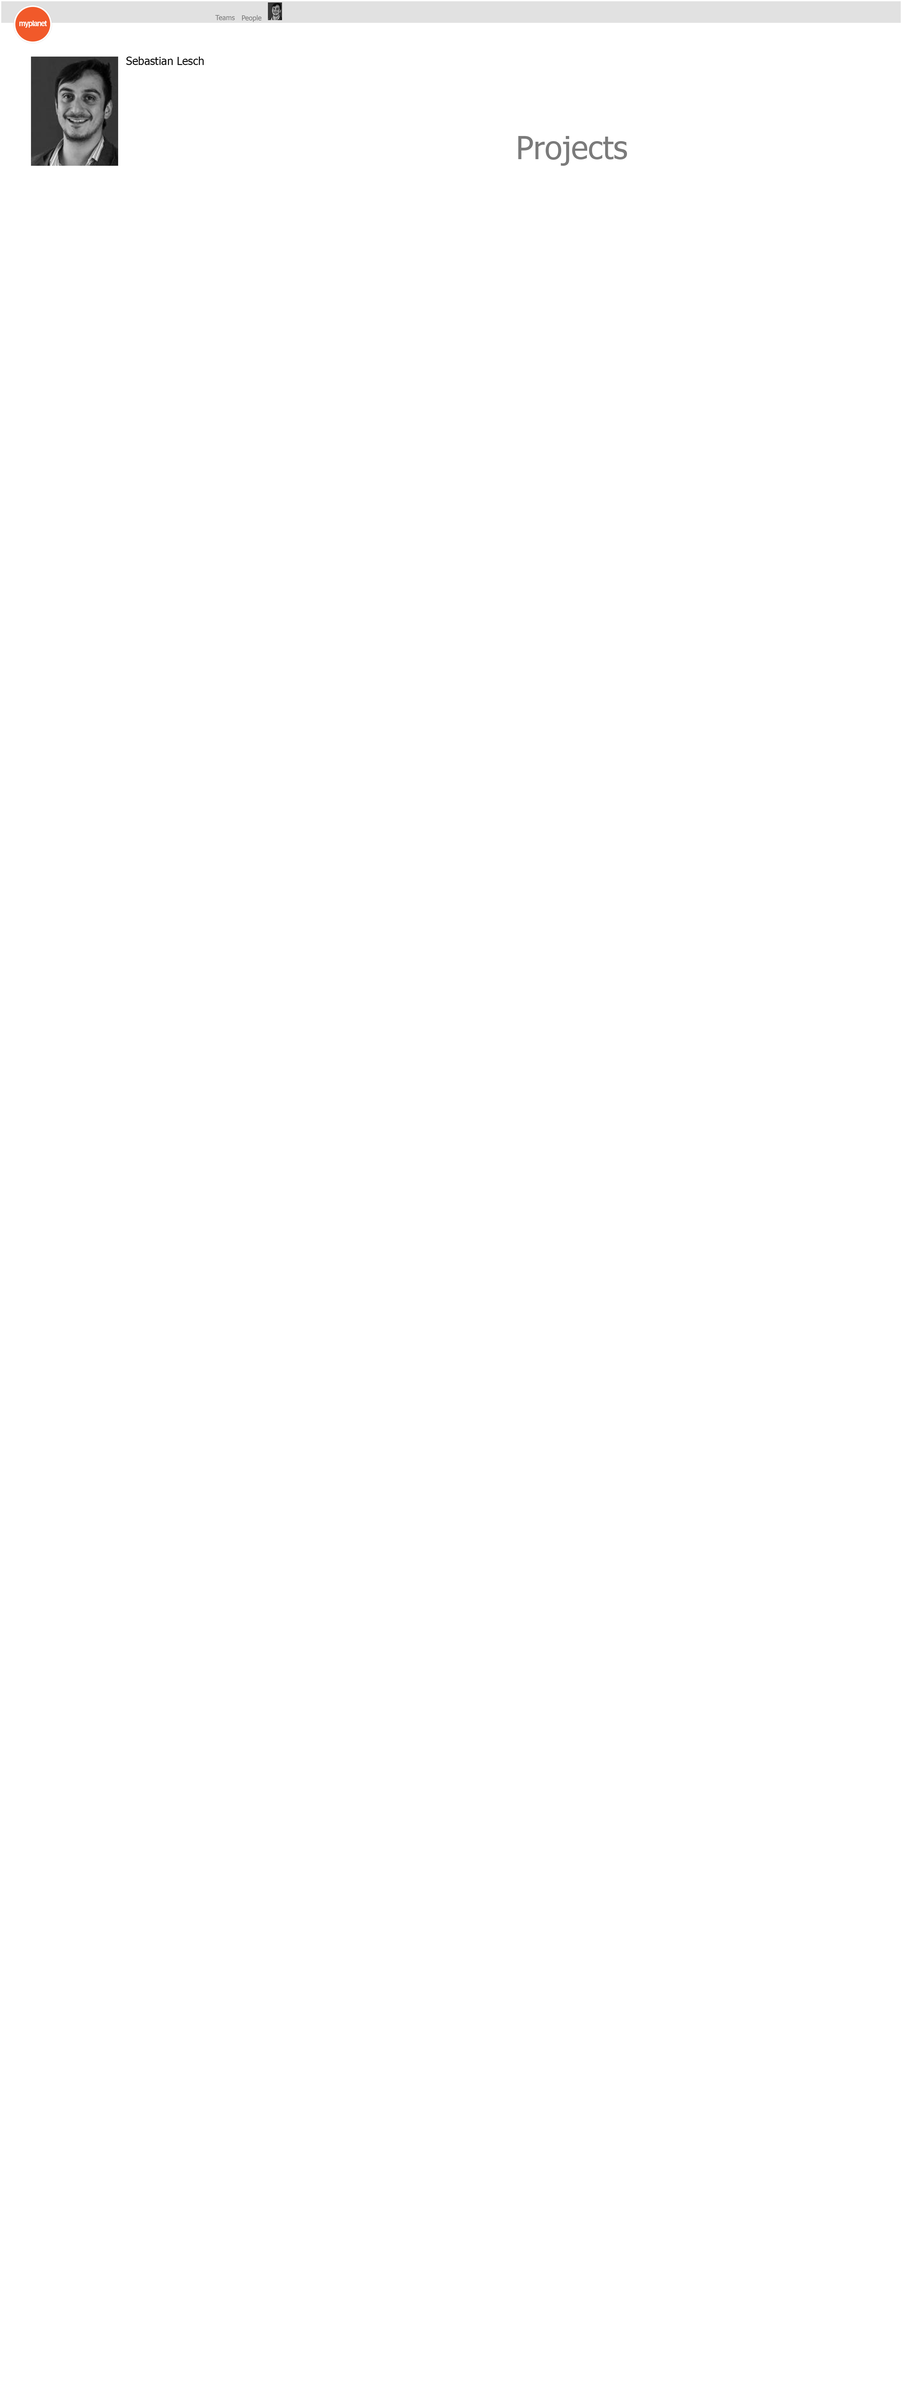
<style>
.page{position:relative;width:902px;height:2407px;background:#ffffff}
.page>*{position:absolute;margin:0}
.t1{font:6.9px "Tahoma";color:#7b7b7b}
.t2{font:11.1px "Tahoma";color:#000000}
.t3{font:32px "Tahoma";color:#7b7b7b}
</style>
<div class="page">
<p class="t1" style="left:215px;top:15px;width:20px;height:5px">Teams</p>
<p class="t1" style="left:242px;top:15px;width:20px;height:7px">People</p>
<p class="t2" style="left:126px;top:57px;width:78px;height:8px">Sebastian Lesch</p>
<p class="t3" style="left:518px;top:136px;width:110px;height:30px">Projects</p>
</div>
